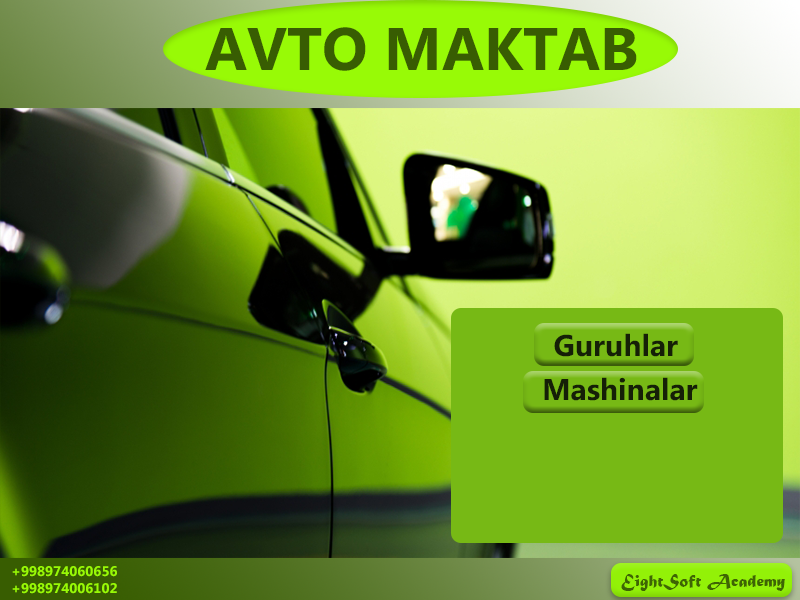
<style>
.page{position:relative;width:800px;height:600px}
.page>*{position:absolute;margin:0}
.t1{font:60px "MicrosoftPhagsPa-Bold";color:#385d02}
.t2{font:30px "MicrosoftPhagsPa-Bold";color:#151f07}
.t3{font:14px "MicrosoftPhagsPa-Bold";color:#98fa06}
.t4{font:18px "MaturaMTScriptCapitals";color:#3e6504}
.t5{font:12px "MyriadPro-Regular";color:#385d01}
</style>
<div class="page">
<p class="t1" style="left:205px;top:27px;width:432px;height:44px">AVTO MAKTAB</p>
<p class="t2" style="left:554px;top:333px;width:124px;height:24px">Guruhlar</p>
<p class="t2" style="left:544px;top:377px;width:154px;height:24px">Mashinalar</p>
<p class="t3" style="left:12px;top:566px;width:105px;height:28px">+998974060656<br>+998974006102</p>
<p class="t4" style="left:621px;top:574px;width:164px;height:17px"><span class="t5">                           </span>EightSoft Academy</p>
</div>
